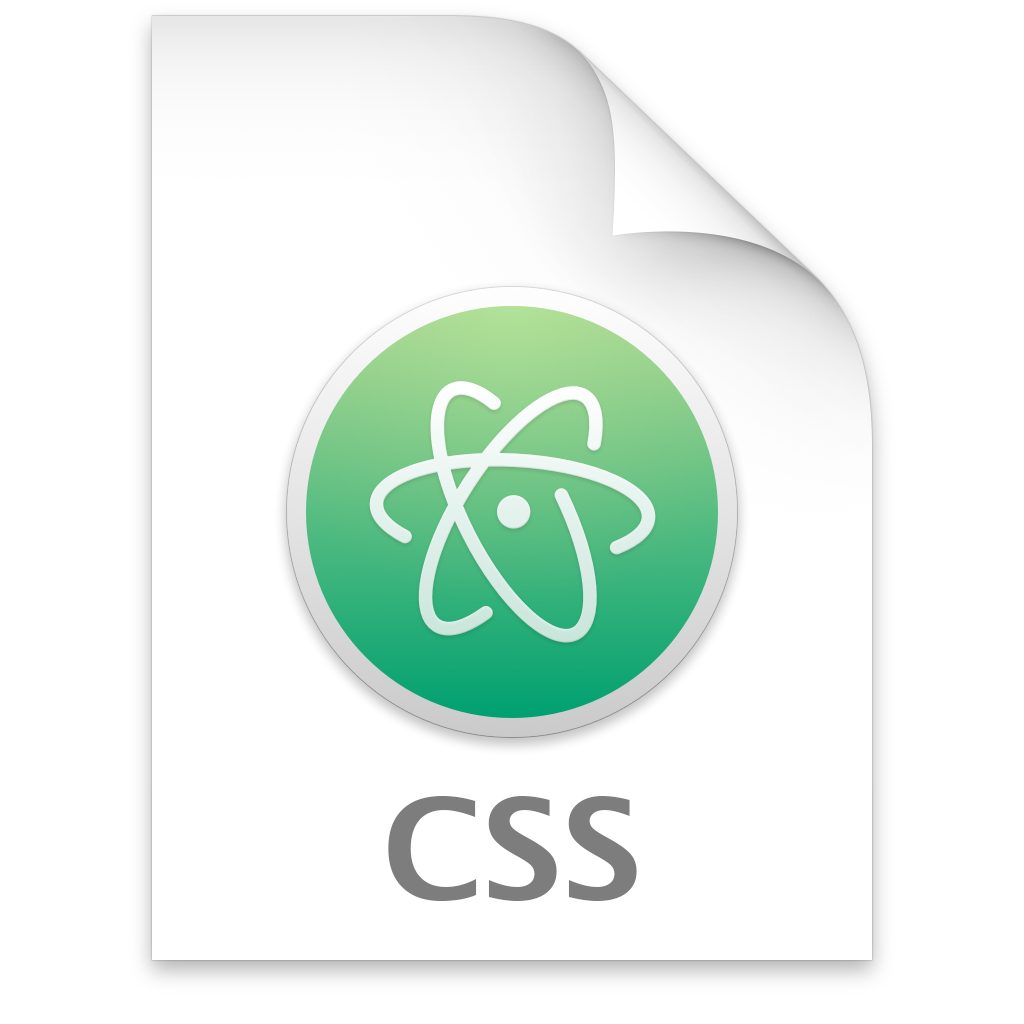
<style>
.page{position:relative;width:1024px;height:1024px;background:#ffffff}
.page>*{position:absolute;margin:0}
.t1{font:140px "LucidaGrande-Bold";color:#7d7d7d}
</style>
<div class="page">
<p class="t1" style="left:388px;top:796px;width:249px;height:105px">CSS</p>
</div>
